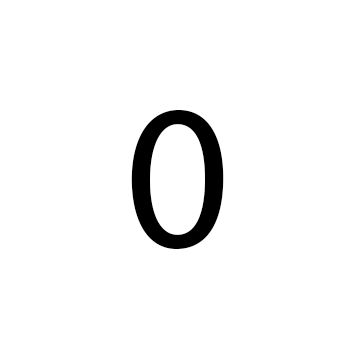
<style>
.page{position:relative;width:354px;height:354px;background:#ffffff}
.page>*{position:absolute;margin:0}
.t1{font:208.3px "MyriadPro-Regular";color:#000000}
</style>
<div class="page">
<p class="t1" style="left:131px;top:109px;width:93px;height:141px">0</p>
</div>
